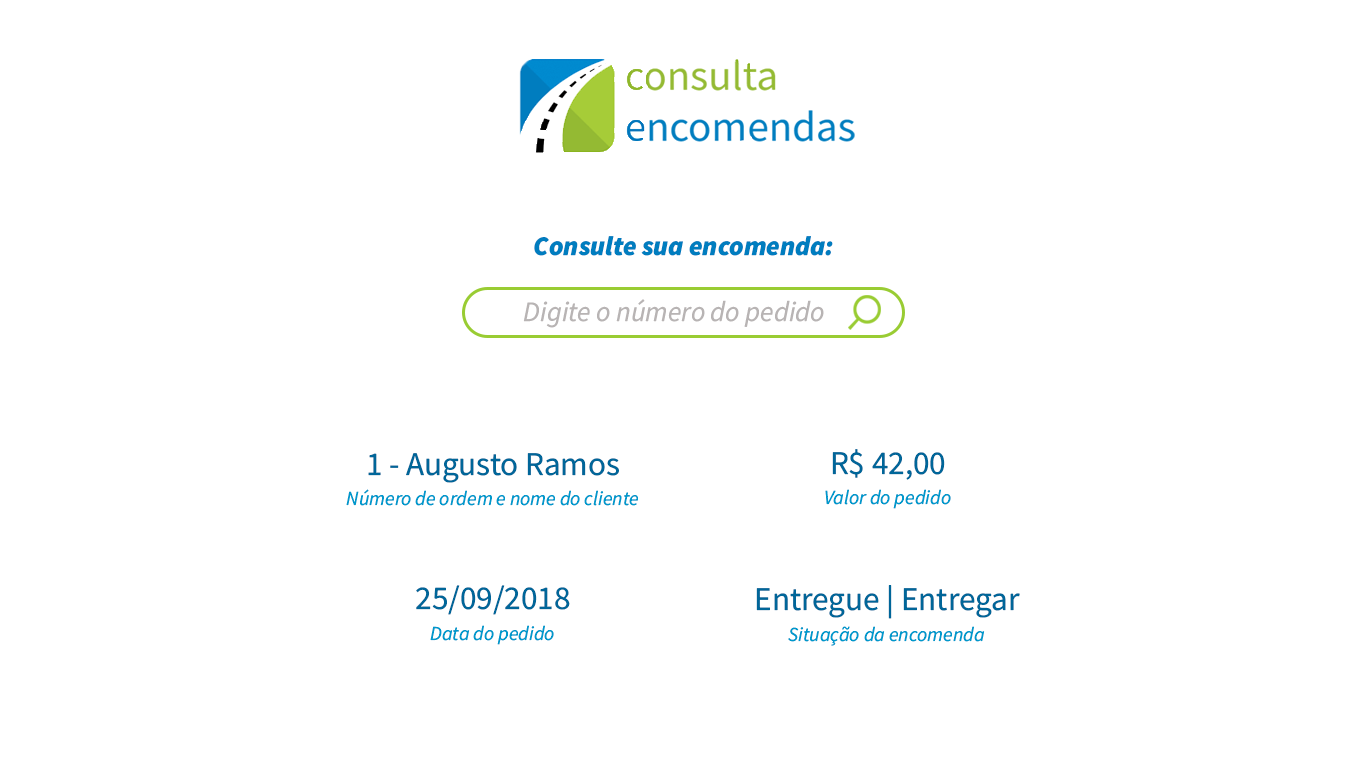
<style>
.page{position:relative;width:1366px;height:768px;background:#ffffff}
.page>*{position:absolute;margin:0}
.t1{font:26.9px "SourceSansItalic-BlackItalic";color:#007dbf}
.t2{font:28.1px "SourceSansItalic-Italic";color:#b8b4b4}
.t3{font:19.9px/30.5px "SourceSansItalic-Italic";color:#0099cc}
.t4{font:33.2px/30.5px "SourceSansRoman-Regular";color:#006699}
</style>
<div class="page">
<p class="t1" style="left:534px;top:236px;width:299px;height:20px">Consulte sua encomenda:</p>
<p class="t2" style="left:523px;top:299px;width:301px;height:29px">Digite o número do pedido</p>
<p class="t3" style="left:825px;top:449px;width:126px;height:60px;text-align:center"><span class="t4">R$ 42,00<br></span>Valor do pedido</p>
<p class="t3" style="left:346px;top:453px;width:292px;height:53px;text-align:center"><span class="t4">1 - Augusto Ramos<br></span>Número de ordem e nome do cliente</p>
<p class="t3" style="left:416px;top:585px;width:154px;height:60px;text-align:center"><span class="t4">25/09/2018<br></span>Data do pedido</p>
<p class="t3" style="left:756px;top:585px;width:264px;height:61px;text-align:center"><span class="t4">Entregue | Entregar<br></span>Situação da encomenda</p>
</div>
